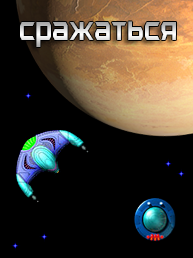
<style>
.page{position:relative;width:193px;height:258px;background:#000000}
.page>*{position:absolute;margin:0}
.t1{font:36px "AeromaticsSmallCapsNC";scale:0.5 1}
.t2{font:60px "AeromaticsSmallCapsNC";scale:0.5 1}
</style>
<div class="page">
<p class="t1" style="left:20px;top:21px;width:156px;height:26px"><span class="t2"> </span>сражаться</p>
</div>
